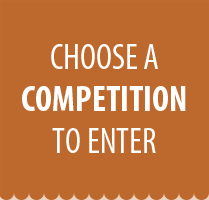
<style>
.page{position:relative;width:209px;height:200px;background:#bd692e}
.page>*{position:absolute;margin:0}
.t1{font:36px/42px "MyriadPro-BoldCond";color:#ffffff}
.t2{font:36px/42px "MyriadPro-Cond";color:#ffffff}
</style>
<div class="page">
<p class="t1" style="left:22px;top:44px;width:164px;height:109px;text-align:center"><span class="t2">CHOOSE A<br></span>COMPETITION<br><span class="t2">TO ENTER</span></p>
</div>
